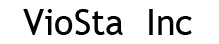
<style>
.page{position:relative;width:219px;height:44px;background:#ffffff}
.page>*{position:absolute;margin:0}
.t1{font:36px "TrebuchetMS";color:#000000}
</style>
<div class="page">
<p class="t1" style="left:23px;top:9px;width:169px;height:26px">VioSta  Inc</p>
</div>
